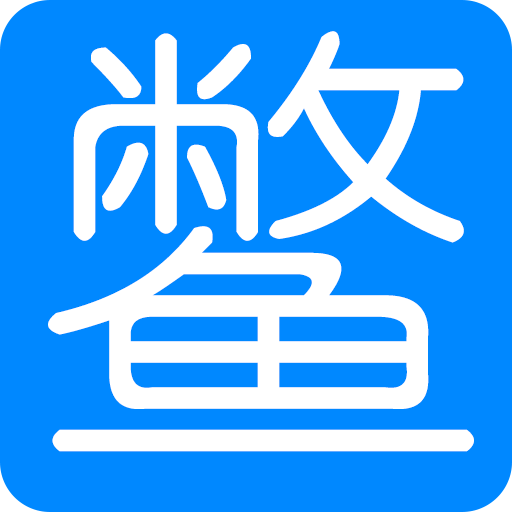
<style>
.page{position:relative;width:512px;height:512px;background:#0088ff}
.page>*{position:absolute;margin:0}
.t1{font:453px "YouYuan";color:#ffffff}
</style>
<div class="page">
<p class="t1" style="left:48px;top:31px;width:426px;height:421px">鳖</p>
</div>
